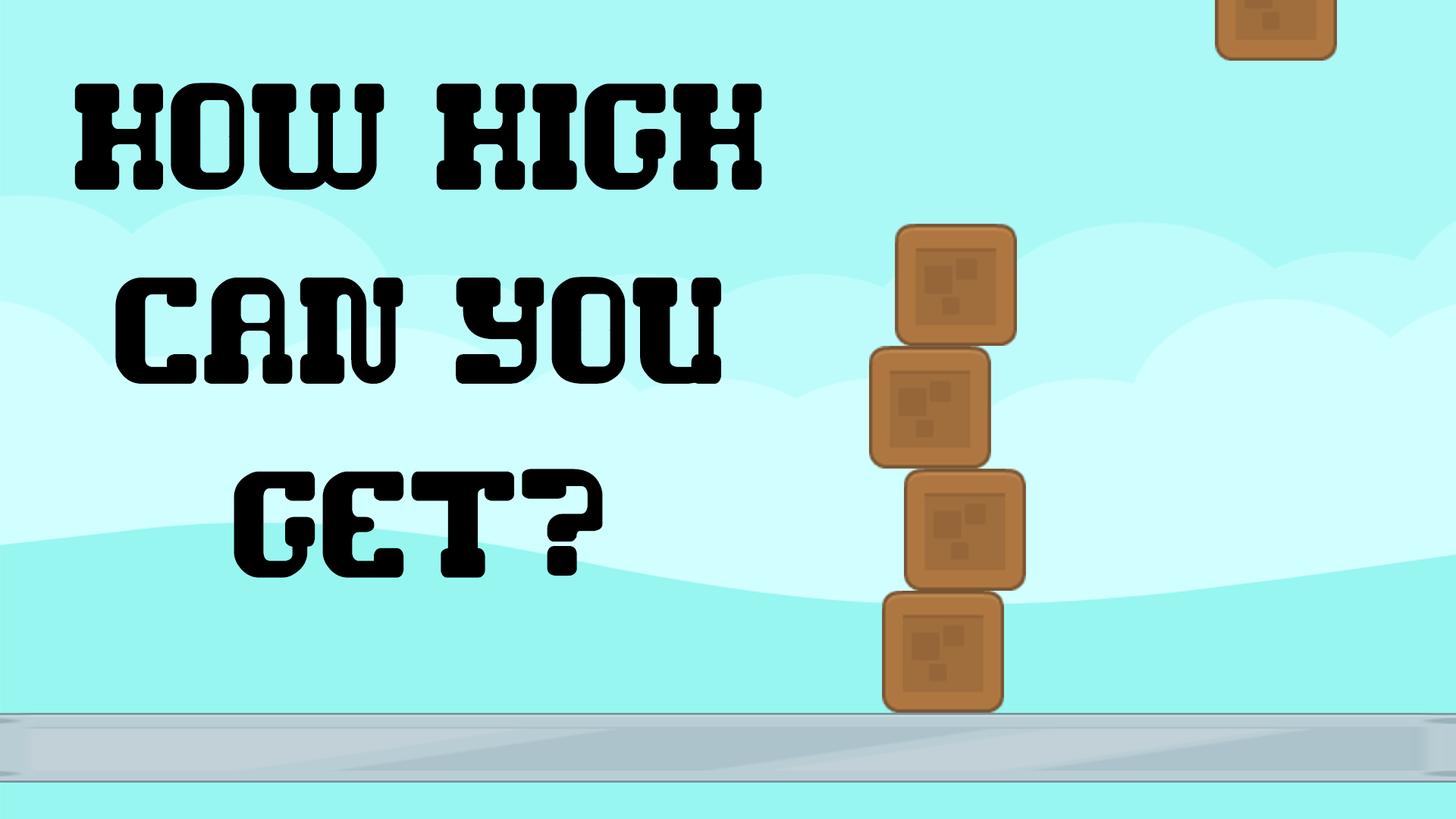
<style>
.page{position:relative;width:1456px;height:819px;background:#aaf9f7}
.page>*{position:absolute;margin:0}
.t1{font:161.6px "gamerobot";color:#000000}
</style>
<div class="page">
<p class="t1" style="left:74px;top:83px;width:688px;height:495px;text-align:center">How High <br>Can You <br>GET?</p>
</div>
